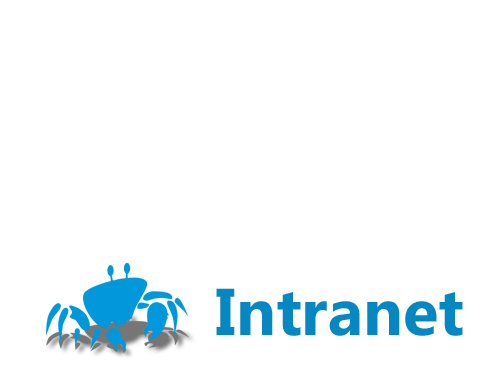
<style>
.page{position:relative;width:500px;height:378px;background:#ffffff}
.page>*{position:absolute;margin:0}
.t1{font:66.1px "LaoUI-Bold";color:#0588c1}
</style>
<div class="page">
<p class="t1" style="left:216px;top:288px;width:247px;height:48px">Intranet</p>
</div>
